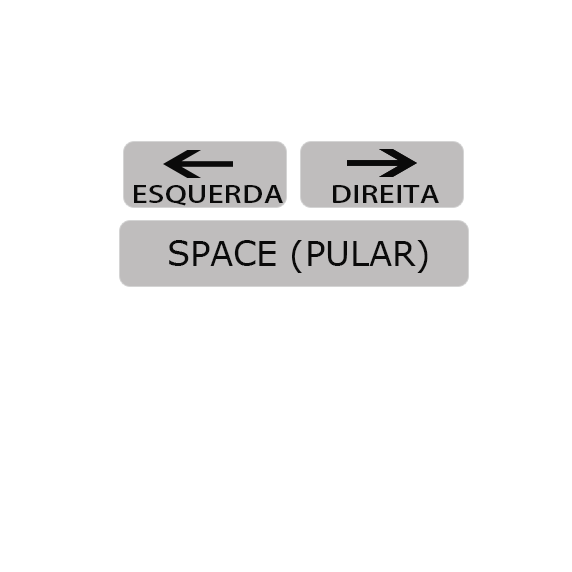
<style>
.page{position:relative;width:572px;height:572px;background:#ffffff}
.page>*{position:absolute;margin:0}
.t1{font:23.5px "AdobeHeitiStd-Regular";color:#0a0a0a;scale:1.29 1}
.t2{font:33.7px "Verdana";color:#0a0a0a}
</style>
<div class="page">
<p class="t1" style="left:134px;top:185px;width:149px;height:21px">ESQUERDA</p>
<p class="t1" style="left:333px;top:185px;width:106px;height:18px">DIREITA</p>
<p class="t2" style="left:169px;top:240px;width:259px;height:33px">SPACE (PULAR)</p>
</div>
